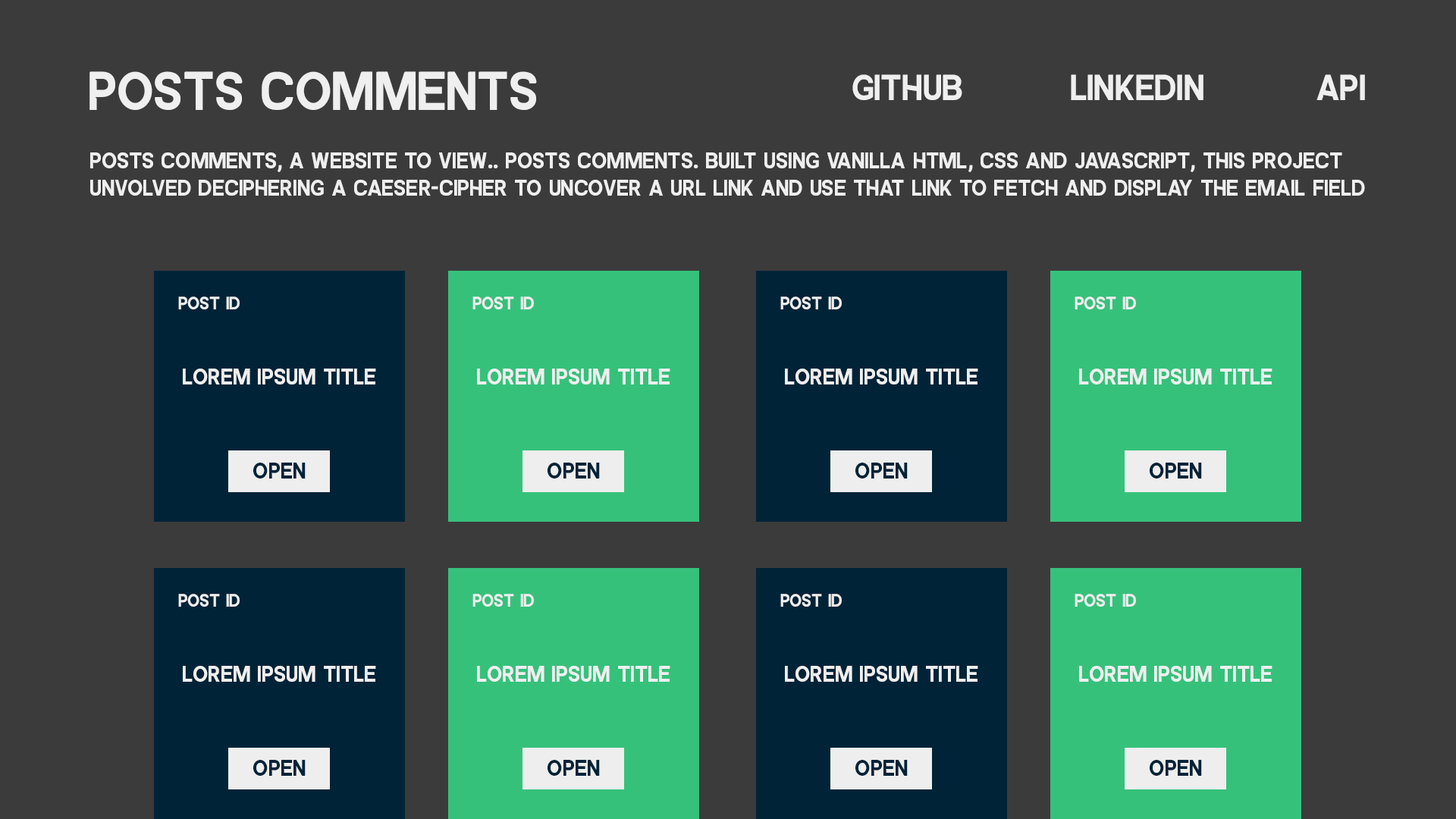
<style>
.page{position:relative;width:1456px;height:819px;background:#3b3b3b}
.page>*{position:absolute;margin:0}
.t1{font:54.6px "ALISEORegular";color:#efefef}
.t2{font:36.4px "ALISEORegular";color:#efefef}
.t3{font:22.7px "ALISEORegular";color:#efefef}
.t4{font:18.2px "ALISEORegular";color:#efefef}
.t5{font:22.7px "ALISEORegular";color:#002337}
</style>
<div class="page">
<p class="t1" style="left:89px;top:71px;width:448px;height:39px">Posts Comments</p>
<p class="t2" style="left:852px;top:74px;width:513px;height:26px">Github    linkedin     api</p>
<p class="t3" style="left:90px;top:152px;width:1275px;height:44px">Posts comments, A website to view.. Posts Comments. Built using Vanilla HTML, CSS and Javascript, this project unvolved deciphering a caeser-cipher to uncover a url link and use that link to fetch and display the email field</p>
<p class="t4" style="left:178px;top:297px;width:62px;height:12px">POst Id</p>
<p class="t4" style="left:472px;top:297px;width:62px;height:12px">POst Id</p>
<p class="t4" style="left:780px;top:297px;width:62px;height:12px">POst Id</p>
<p class="t4" style="left:1075px;top:297px;width:61px;height:12px">POst Id</p>
<p class="t3" style="left:183px;top:369px;width:193px;height:15px">lorem ipsum title</p>
<p class="t3" style="left:477px;top:369px;width:193px;height:15px">lorem ipsum title</p>
<p class="t3" style="left:785px;top:369px;width:193px;height:15px">lorem ipsum title</p>
<p class="t3" style="left:1079px;top:369px;width:193px;height:15px">lorem ipsum title</p>
<p class="t5" style="left:253px;top:463px;width:53px;height:16px">open</p>
<p class="t5" style="left:548px;top:463px;width:52px;height:16px">open</p>
<p class="t5" style="left:855px;top:463px;width:53px;height:16px">open</p>
<p class="t5" style="left:1150px;top:463px;width:52px;height:16px">open</p>
<p class="t4" style="left:178px;top:594px;width:62px;height:13px">POst Id</p>
<p class="t4" style="left:472px;top:594px;width:62px;height:13px">POst Id</p>
<p class="t4" style="left:780px;top:594px;width:62px;height:13px">POst Id</p>
<p class="t4" style="left:1075px;top:594px;width:61px;height:13px">POst Id</p>
<p class="t3" style="left:183px;top:666px;width:193px;height:16px">lorem ipsum title</p>
<p class="t3" style="left:477px;top:666px;width:193px;height:16px">lorem ipsum title</p>
<p class="t3" style="left:785px;top:666px;width:193px;height:16px">lorem ipsum title</p>
<p class="t3" style="left:1079px;top:666px;width:193px;height:16px">lorem ipsum title</p>
<p class="t5" style="left:253px;top:760px;width:53px;height:16px">open</p>
<p class="t5" style="left:548px;top:760px;width:52px;height:16px">open</p>
<p class="t5" style="left:855px;top:760px;width:53px;height:16px">open</p>
<p class="t5" style="left:1150px;top:760px;width:52px;height:16px">open</p>
</div>
